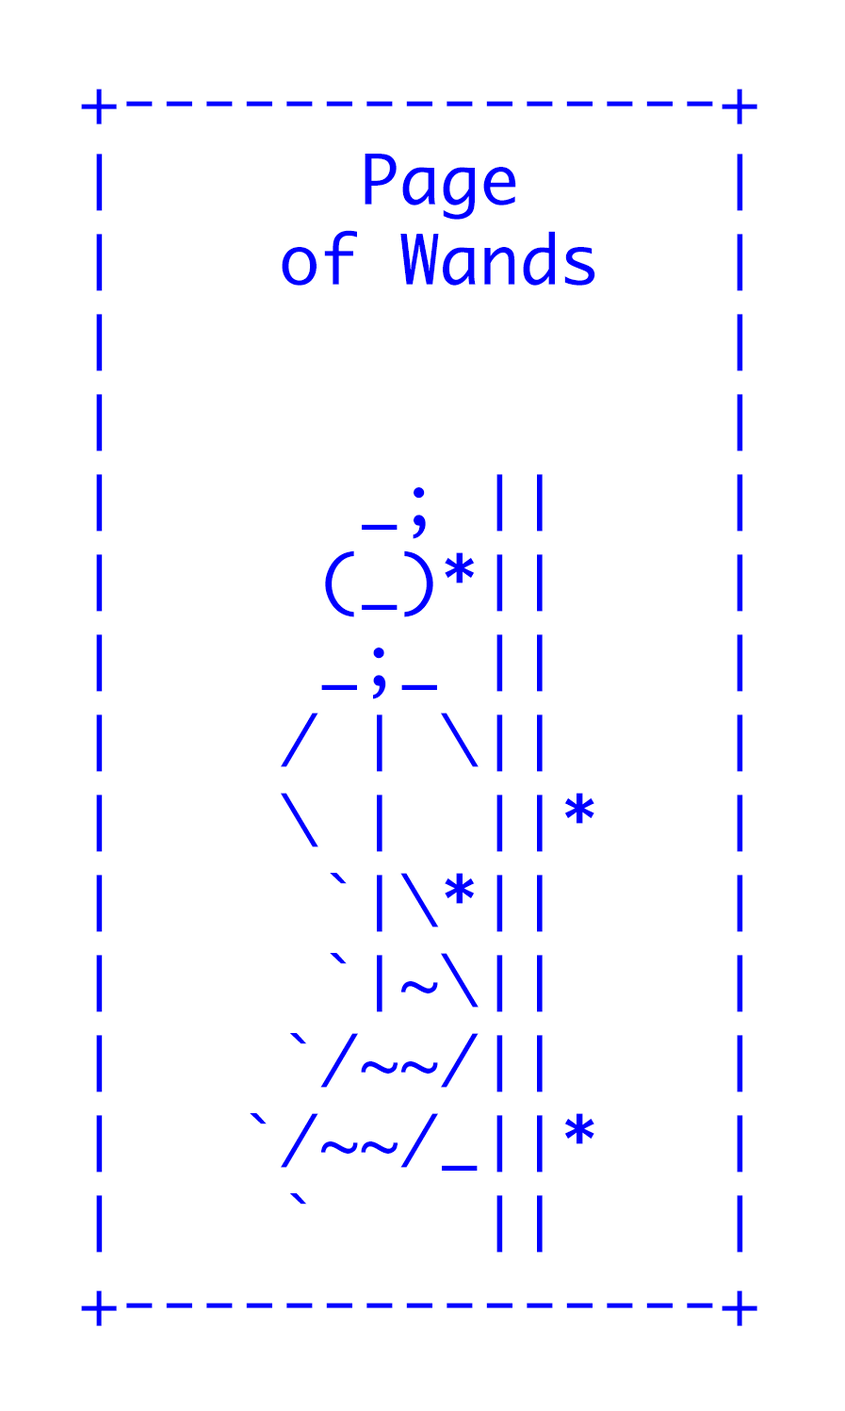
<style>
.page{position:relative;width:845px;height:1411px;background:#ffffff}
.page>*{position:absolute;margin:0}
.t1{font:66.7px "Monaco";color:#0000ff}
</style>
<div class="page">
<p class="t1" style="left:81px;top:89px;width:677px;height:1237px">+---------------+<br>│      Page     │<br>│    of Wands   │<br>│               │<br>│               │<br>│      _; ││    │<br>│     (_)*││    │<br>│     _;_ ││    │<br>│    / │ \││    │ <br>│    \ │  ││*   │ <br>│     `│\*││    │<br>│     `│~\││    │ <br>│    `/~~/││    │ <br>│   `/~~/_││*   │<br>│    `    ││    │<br>+---------------+</p>
</div>
